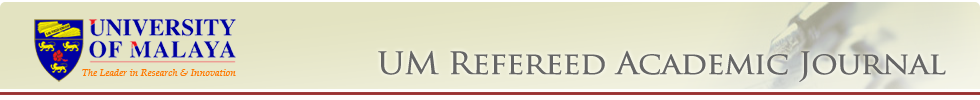
<style>
.page{position:relative;width:980px;height:100px}
.page>*{position:absolute;margin:0}
.t1{font:30px "TrajanPro-Regular";letter-spacing:-0.05em;color:#666666;font-weight:bold;scale:1.1 1}
.t2{font:10.3px "PalatinoLinotype-Italic";color:#fe7902}
</style>
<div class="page">
<p class="t1" style="left:378px;top:50px;width:568px;height:32px">UM Refereed Academic Journal</p>
<p class="t2" style="left:82px;top:69px;width:154px;height:7px">The Leader in Research &amp; Innovation</p>
</div>
